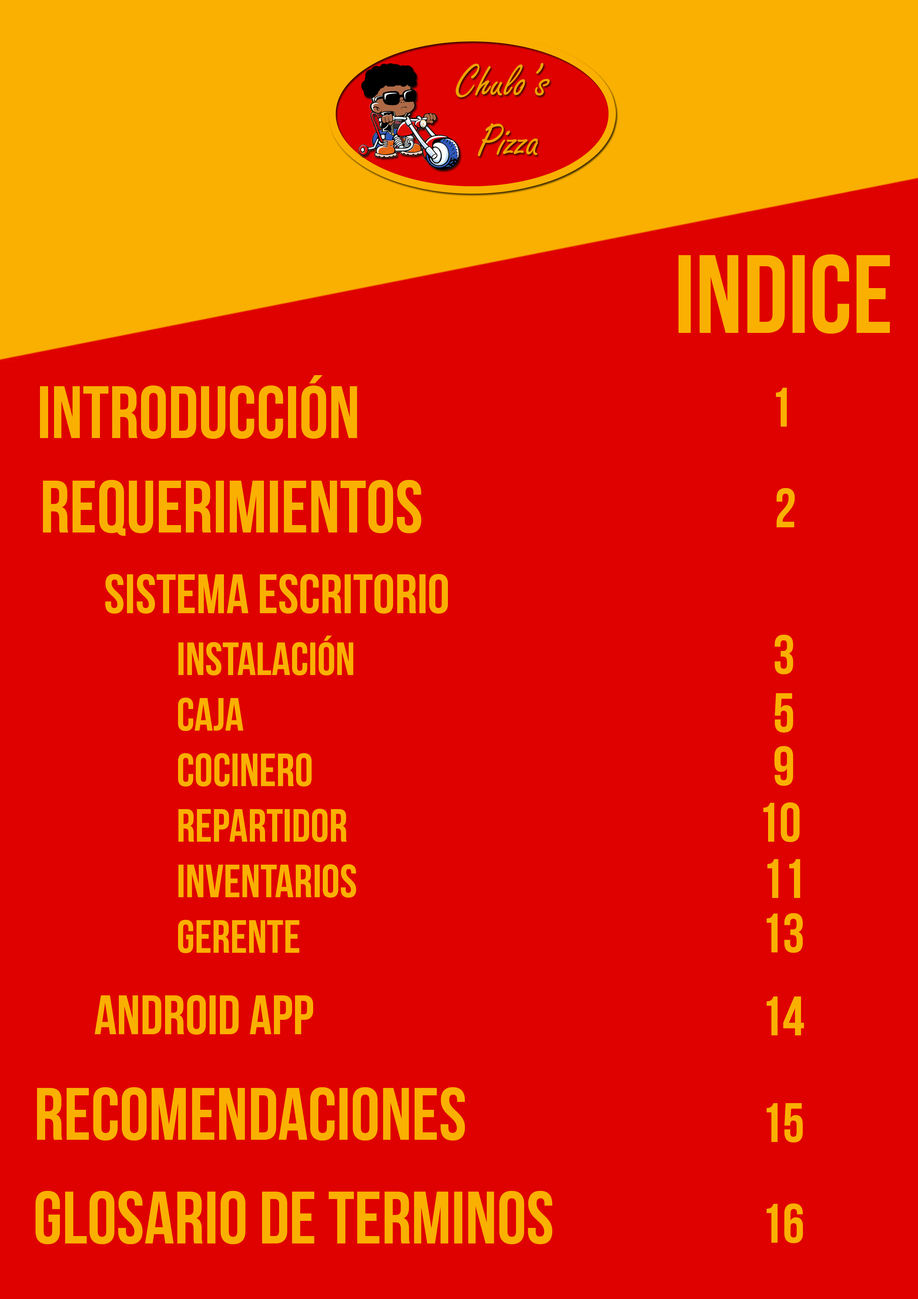
<style>
.page{position:relative;width:918px;height:1299px;background:#df0000}
.page>*{position:absolute;margin:0}
.t1{font:111.1px "BebasNeueBold";color:#fab000}
.t2{font:74px "BebasNeueBold";color:#fab000}
.t3{font:55.5px "BebasNeueBold";color:#fab000}
.t4{font:46.3px "BebasNeueBold";color:#fab000}
</style>
<div class="page">
<p class="t1" style="left:679px;top:254px;width:211px;height:80px">indice</p>
<p class="t2" style="left:40px;top:375px;width:317px;height:64px">INTRODUCCIÓN</p>
<p class="t3" style="left:776px;top:388px;width:11px;height:38px">1</p>
<p class="t2" style="left:43px;top:480px;width:378px;height:56px">REQUERIMIENTOS</p>
<p class="t3" style="left:777px;top:488px;width:18px;height:39px">2</p>
<p class="t3" style="left:105px;top:574px;width:343px;height:39px">Sistema Escritorio</p>
<p class="t4" style="left:178px;top:635px;width:178px;height:318px">InstalaciÓn<br>CAJA<br>cOCINERO<br>Repartidor<br>Inventarios<br>Gerente</p>
<p class="t3" style="left:775px;top:635px;width:18px;height:39px">3</p>
<p class="t3" style="left:775px;top:693px;width:18px;height:40px">5</p>
<p class="t3" style="left:775px;top:746px;width:18px;height:40px">9</p>
<p class="t3" style="left:763px;top:802px;width:37px;height:40px">10</p>
<p class="t3" style="left:767px;top:859px;width:33px;height:39px">11</p>
<p class="t3" style="left:767px;top:913px;width:36px;height:40px">13</p>
<p class="t3" style="left:95px;top:995px;width:218px;height:39px">ANDROID APP</p>
<p class="t3" style="left:767px;top:996px;width:37px;height:39px">14</p>
<p class="t2" style="left:37px;top:1087px;width:428px;height:53px">Recomendaciones</p>
<p class="t3" style="left:767px;top:1103px;width:36px;height:40px">15</p>
<p class="t2" style="left:36px;top:1191px;width:516px;height:53px">glosario de terminos</p>
<p class="t3" style="left:767px;top:1203px;width:36px;height:40px">16</p>
</div>
